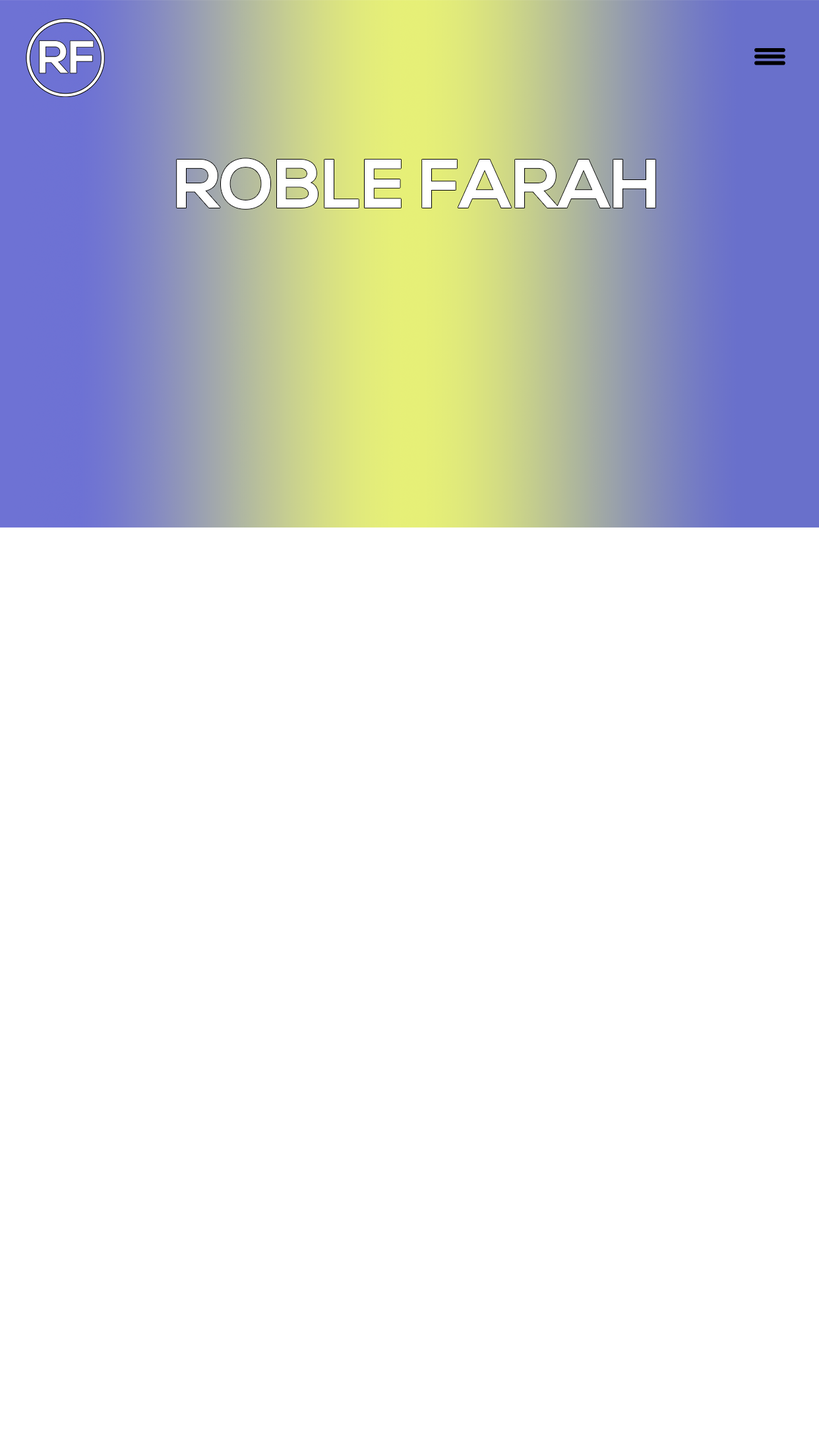
<style>
.page{position:relative;width:819px;height:1456px;background:#ffffff}
.page>*{position:absolute;margin:0}
.t1{font:69px "NexaBold";color:#ffffff;text-transform:uppercase}
</style>
<div class="page">
<p class="t1" style="left:177px;top:158px;width:478px;height:51px">RoblE Farah</p>
</div>
